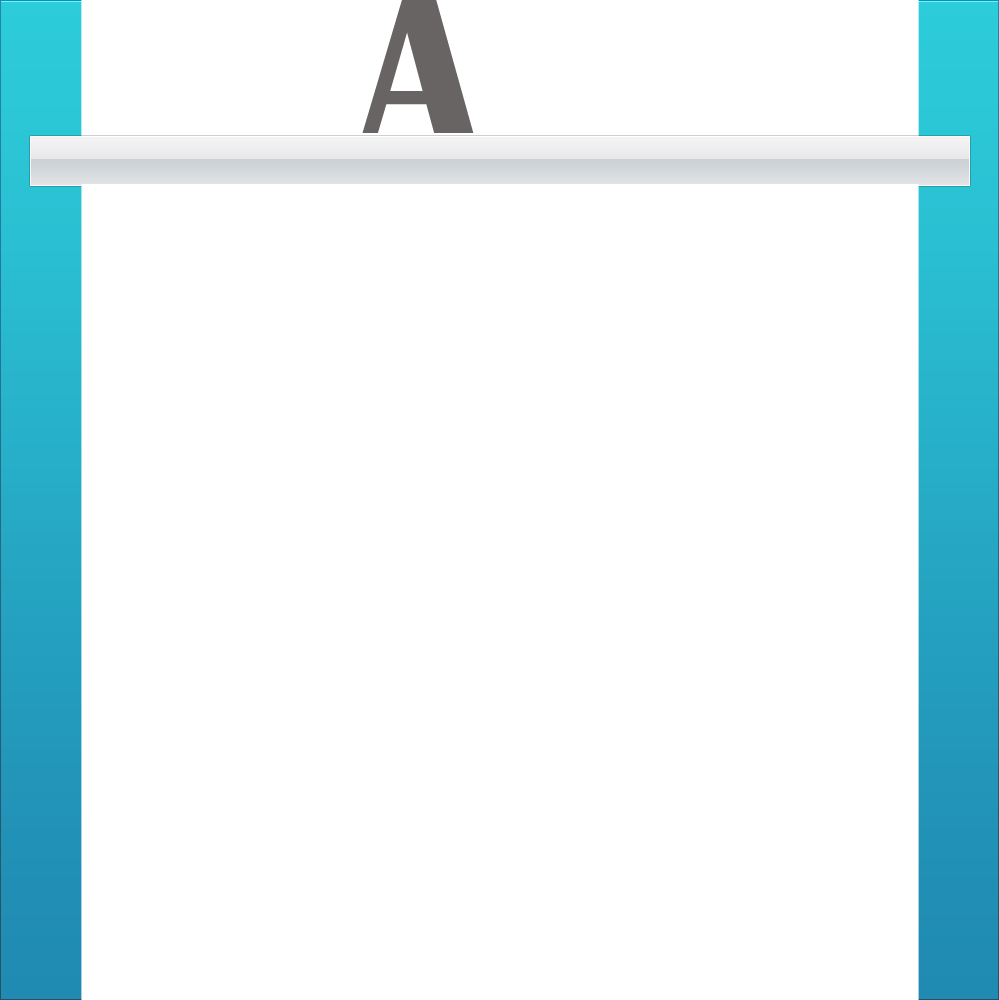
<style>
.page{position:relative;width:999px;height:1000px;background:#ffffff}
.page>*{position:absolute;margin:0}
.t1{font:200px "BritannicBold";color:#696464}
</style>
<div class="page">
<p class="t1" style="left:362px;top:0px;width:112px;height:133px">A</p>
</div>
